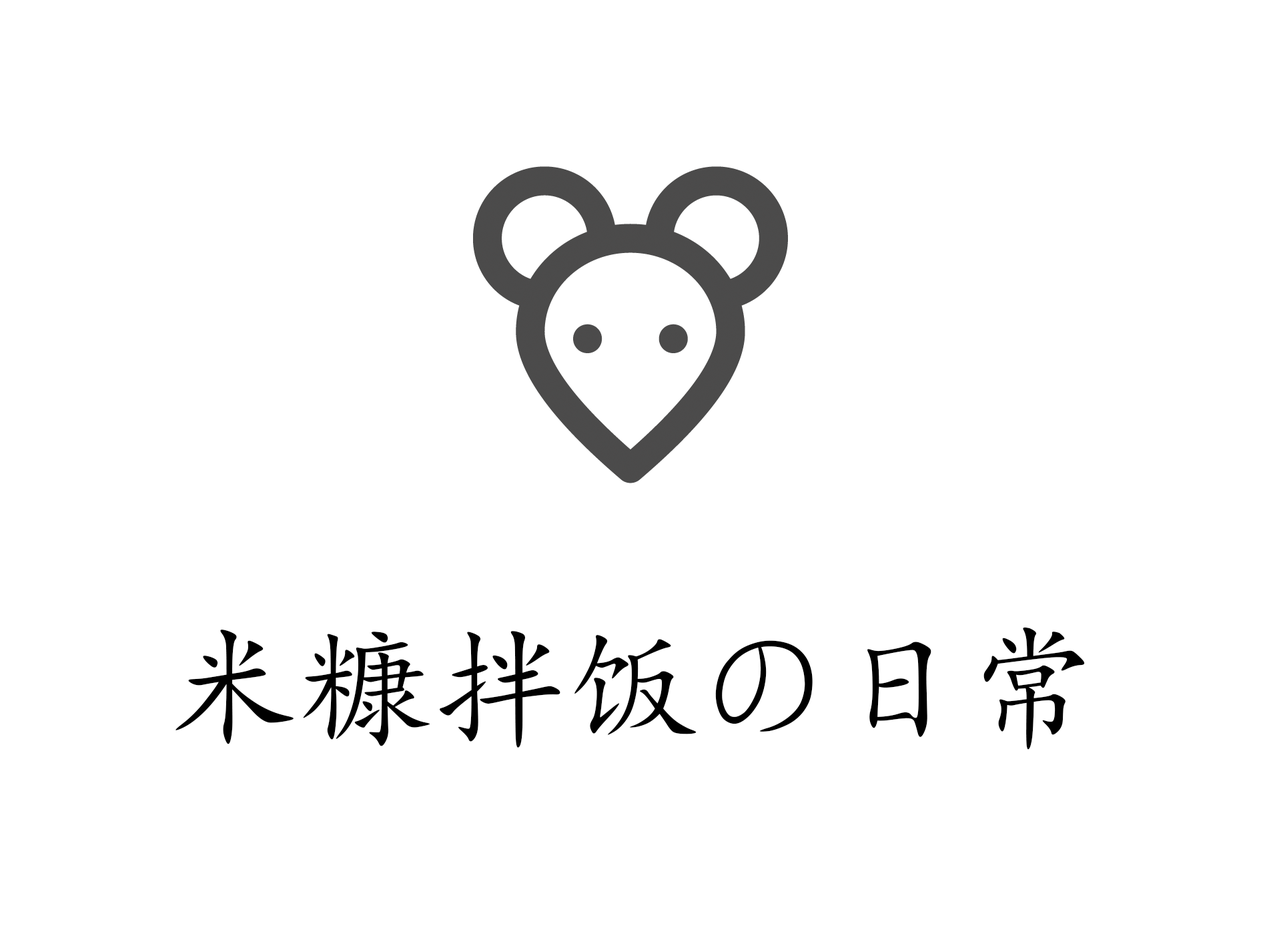
<style>
.page{position:relative;width:1261px;height:946px;background:#ffffff}
.page>*{position:absolute;margin:0}
.t1{font:133.5px "KaiTi";color:#000000}
</style>
<div class="page">
<p class="t1" style="left:175px;top:627px;width:910px;height:122px">米糠拌饭の日常</p>
</div>
